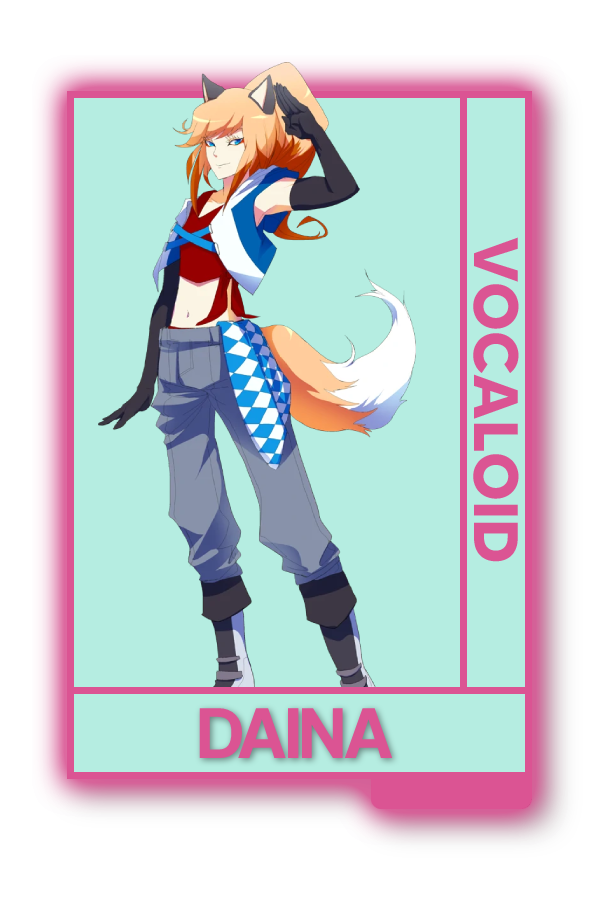
<style>
.page{position:relative;width:600px;height:900px;background:#b5ede1}
.page>*{position:absolute;margin:0}
.t1{font:62.5px "MADETOMMY-Bold";color:#db5493}
.t2{font:75px "CoolveticaRg-Regular";color:#db5493}
</style>
<div class="page">
<p class="t1" style="left:473px;top:237px;width:46px;height:325px;rotate:90deg">VOCALOID</p>
<p class="t2" style="left:199px;top:708px;width:194px;height:50px">DAINA</p>
</div>
